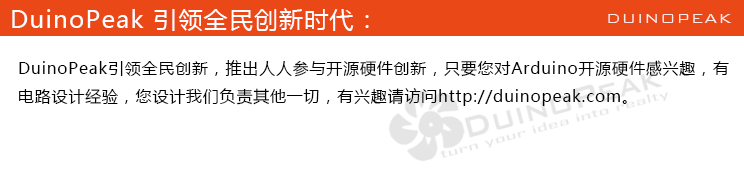
<style>
.page{position:relative;width:744px;height:182px;background:#ffffff}
.page>*{position:absolute;margin:0}
.t1{font:24px "MicrosoftYaHei";letter-spacing:0.05em;color:#ffffff}
.t2{font:18px "BankGothicBT-Light";letter-spacing:0.05em;color:#ffffff}
.t3{font:16px "MicrosoftYaHei";letter-spacing:0.05em;color:#000000}
</style>
<div class="page">
<p class="t1" style="left:12px;top:8px;width:357px;height:23px">DuinoPeak 引领全民创新时代：</p>
<p class="t2" style="left:608px;top:14px;width:124px;height:9px;opacity:0.85">DUINOPEAK</p>
<p class="t3" style="left:19px;top:60px;width:710px;height:46px">DuinoPeak引领全民创新，推出人人参与开源硬件创新，只要您对Arduino开源硬件感兴趣，有<br>电路设计经验，您设计我们负责其他一切，有兴趣请访问http://duinopeak.com。</p>
</div>
